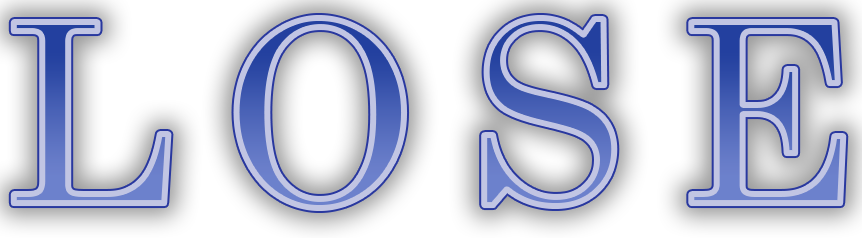
<style>
.page{position:relative;width:862px;height:238px}
.page>*{position:absolute;margin:0}
.t1{font:250px "Century";letter-spacing:0.2em}
</style>
<div class="page">
<p class="t1" style="left:13px;top:18px;width:831px;height:190px">LOSE</p>
</div>
